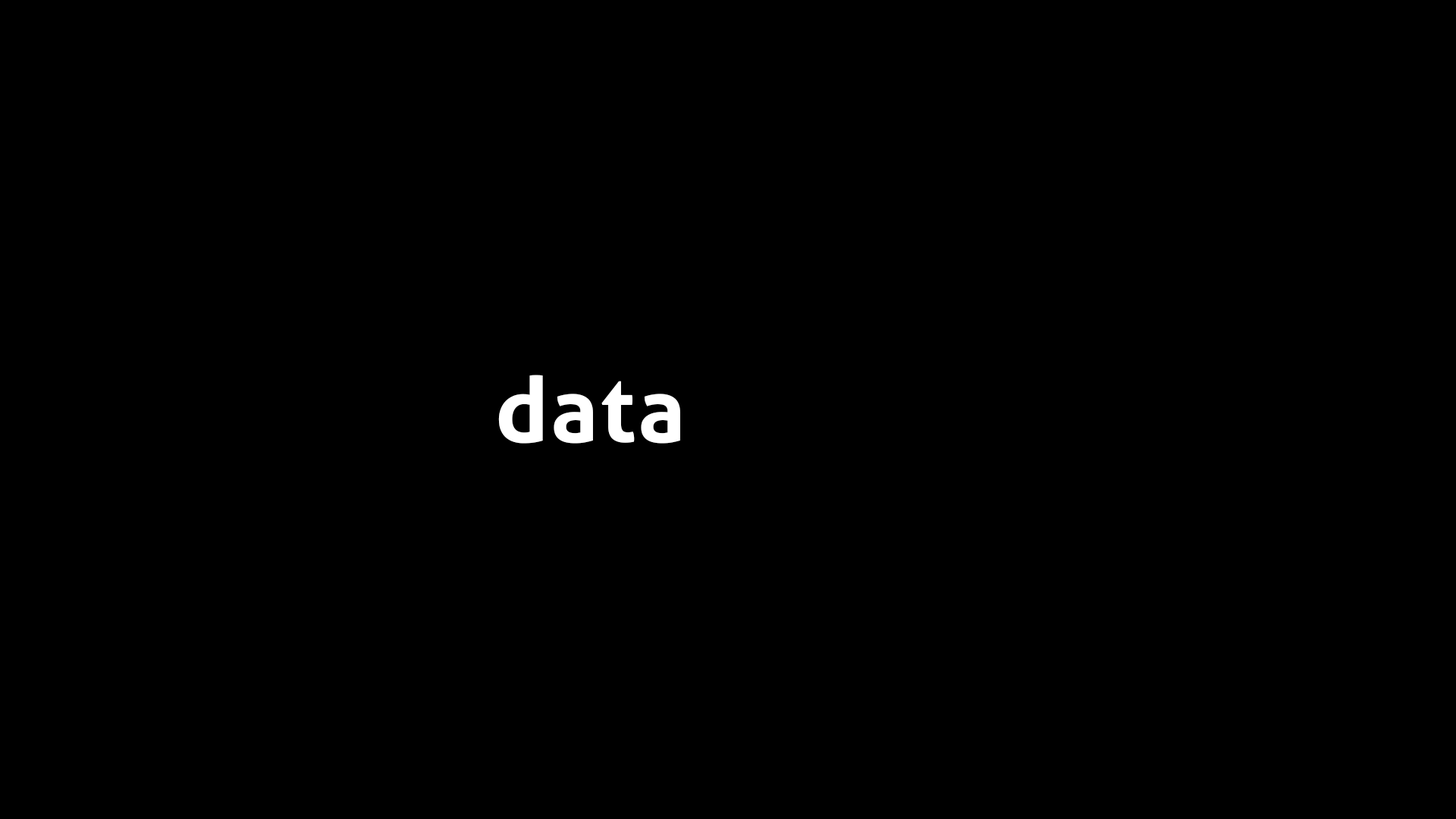
<style>
.page{position:relative;width:1456px;height:819px;background:#000000}
.page>*{position:absolute;margin:0}
.t1{font:91px "Aller-Bold";letter-spacing:0.025em;color:#ffffff}
</style>
<div class="page">
<p class="t1" style="left:498px;top:375px;width:182px;height:69px">data</p>
</div>
